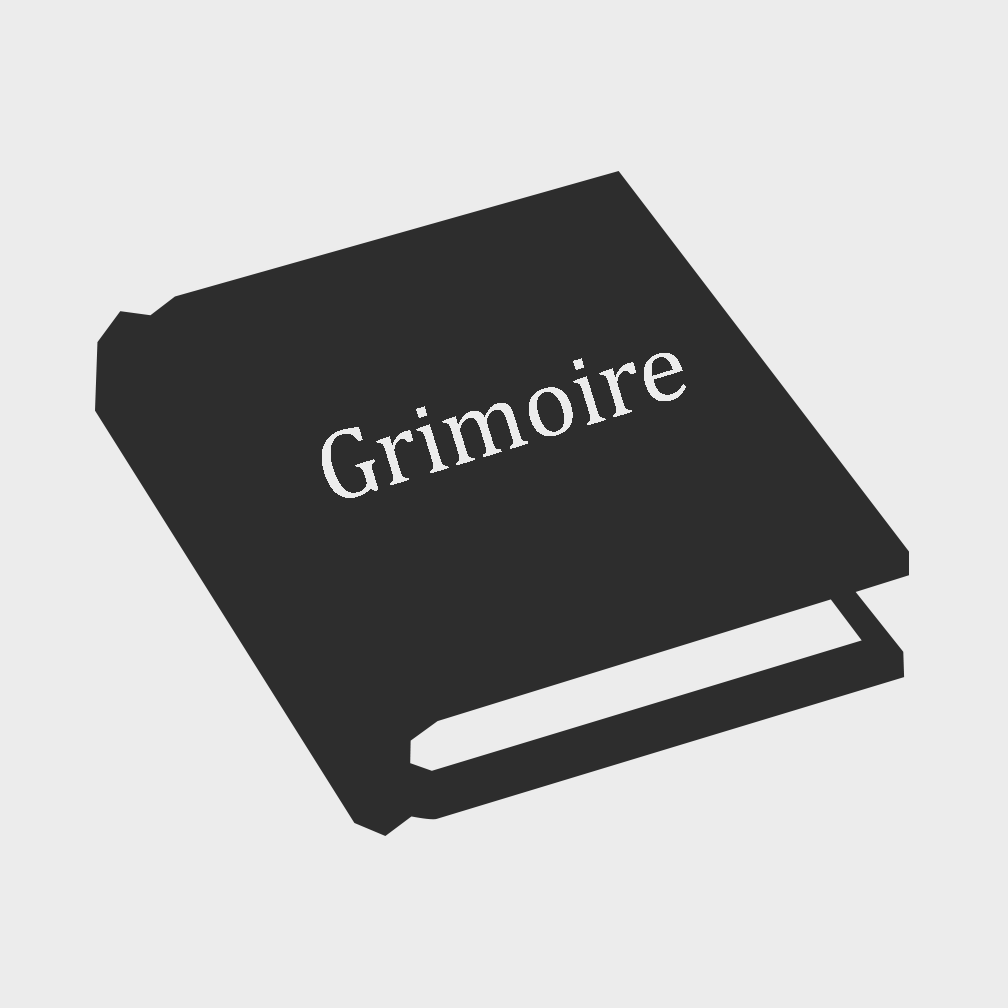
<style>
.page{position:relative;width:1008px;height:1008px;background:#ececec}
.page>*{position:absolute;margin:0}
.t1{font:100px "Cambria";color:#ececec}
</style>
<div class="page">
<p class="t1" style="left:322px;top:353px;width:364px;height:145px;rotate:-17deg">Grimoire</p>
</div>
